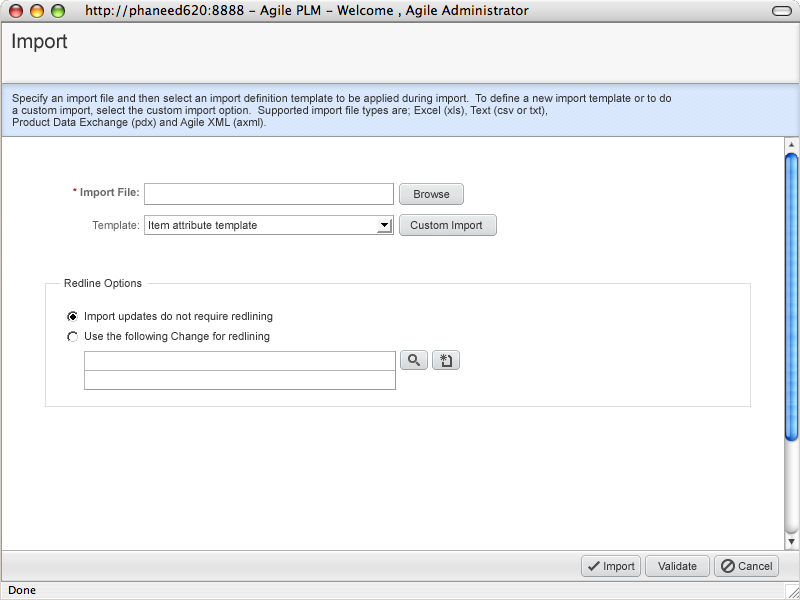
<style>
.page{position:relative;width:800px;height:600px;background:#ffffff}
.page>*{position:absolute;margin:0}
.t1{font:20px "ArialMT";color:#333333}
.t2{font:11px/12px "ArialMT";color:#333333}
.t3{font:11px "Arial-BoldMT";color:#666666}
.t4{font:11px "ArialMT";color:#990000}
.t5{font:11px "ArialMT";color:#333333}
.t6{font:11px "ArialMT";color:#666666}
</style>
<div class="page">
<p class="t1" style="left:12px;top:33px;width:56px;height:19px">Import</p>
<p class="t2" style="left:12px;top:94px;width:659px;height:35px">Specify an import file and then select an import definition template to be applied during import.  To define a new import template or to do <br>a custom import, select the custom import option.  Supported import file types are; Excel (xls), Text (csv or txt), <br>Product Data Exchange (pdx) and Agile XML (axml).</p>
<p class="t3" style="left:73px;top:188px;width:66px;height:11px"><span class="t4"> * </span>Import File:</p>
<p class="t5" style="left:414px;top:190px;width:36px;height:8px">Browse</p>
<p class="t6" style="left:92px;top:221px;width:47px;height:11px">Template:</p>
<p class="t5" style="left:149px;top:221px;width:108px;height:11px">Item attribute template</p>
<p class="t5" style="left:410px;top:221px;width:73px;height:11px">Custom Import</p>
<p class="t5" style="left:64px;top:279px;width:78px;height:11px">Redline Options</p>
<p class="t5" style="left:85px;top:312px;width:188px;height:11px">Import updates do not require redlining</p>
<p class="t5" style="left:85px;top:332px;width:185px;height:11px">Use the following Change for redlining</p>
<p class="t5" style="left:604px;top:562px;width:31px;height:11px">Import</p>
<p class="t5" style="left:658px;top:562px;width:39px;height:8px">Validate</p>
<p class="t5" style="left:738px;top:562px;width:34px;height:8px">Cancel</p>
</div>
